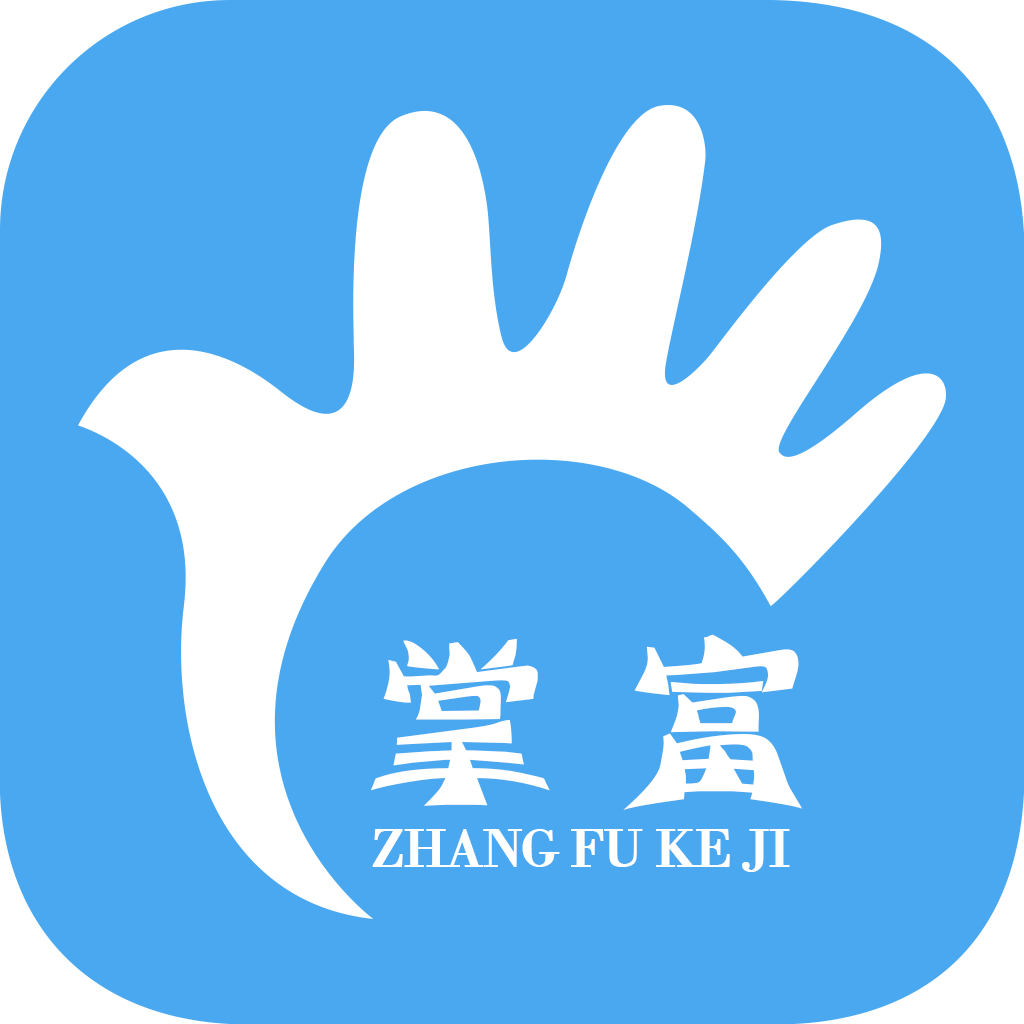
<style>
.page{position:relative;width:1024px;height:1024px;background:#49a8ef}
.page>*{position:absolute;margin:0}
.t1{font:240px "HYk5gj";letter-spacing:0.05em;color:#ffffff}
.t2{font:55px "BodoniMT";letter-spacing:-0.07em;color:#ffffff;font-weight:bold}
</style>
<div class="page">
<p class="t1" style="left:371px;top:634px;width:432px;height:176px">掌富</p>
<p class="t2" style="left:372px;top:829px;width:418px;height:43px">ZHANG FU KE JI</p>
</div>
